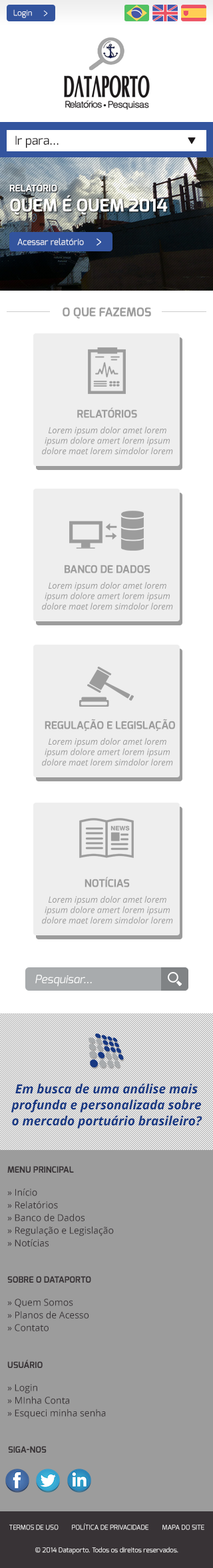
<style>
.page{position:relative;width:213px;height:1568px;background:#ffffff}
.page>*{position:absolute;margin:0}
.t1{font:8px "Exo-Regular";color:#ffffff}
.t2{font:12px "Exo-Regular";color:#1b1718}
.t3{font:17.3px/20px "Exo-Bold";color:#ffffff;text-transform:uppercase}
.t4{font:9.3px/20px "Exo-Bold";color:#ffffff;text-transform:uppercase}
.t5{font:8.7px "Exo-Regular";color:#ffffff}
.t6{font:12px "Exo-Bold";color:#9c9c9c}
.t7{font:10.7px "Exo-Bold";color:#9c9c9c}
.t8{font:8.7px "OpenSans-Italic";color:#999999}
.t9{font:11.3px "Exo-Italic";color:#ffffff}
.t10{font:12.7px/16px "OpenSans-BoldItalic";color:#173883}
.t11{font:9.3px/12.7px "OpenSans";color:#383336}
.t12{font:8.7px "Exo-Bold";color:#383336;text-transform:uppercase}
.t13{font:6.7px "Exo-Regular";color:#ffffff;text-transform:uppercase}
.t14{font:6.7px "Exo-Regular";color:#ffffff}
</style>
<div class="page">
<p class="t1" style="left:13px;top:9px;width:19px;height:9px">Login</p>
<p class="t2" style="left:15px;top:135px;width:44px;height:13px">Ir para...</p>
<p class="t3" style="left:9px;top:183px;width:159px;height:32px"><span class="t4">relatório<br></span>QUEM É quem 2014</p>
<p class="t5" style="left:17px;top:238px;width:67px;height:7px">Acessar relatório</p>
<p class="t6" style="left:63px;top:307px;width:88px;height:12px">O QUE FAZEMOS</p>
<p class="t7" style="left:77px;top:407px;width:60px;height:11px">RELATÓRIOS</p>
<p class="t8" style="left:42px;top:427px;width:131px;height:28px;text-align:center">Lorem ipsum dolor amet lorem ipsum dolore amert lorem ipsum dolore maet lorem simdolor lorem</p>
<p class="t7" style="left:65px;top:565px;width:86px;height:8px">BANCO DE DADOS</p>
<p class="t8" style="left:42px;top:582px;width:131px;height:28px;text-align:center">Lorem ipsum dolor amet lorem ipsum dolore amert lorem ipsum dolore maet lorem simdolor lorem</p>
<p class="t7" style="left:45px;top:719px;width:130px;height:12px">REGULAÇÃO E LEGISLAÇÃO</p>
<p class="t8" style="left:42px;top:738px;width:131px;height:28px;text-align:center">Lorem ipsum dolor amet lorem ipsum dolore amert lorem ipsum dolore maet lorem simdolor lorem</p>
<p class="t7" style="left:85px;top:877px;width:45px;height:10px">NOTÍCIAS</p>
<p class="t8" style="left:42px;top:896px;width:131px;height:28px;text-align:center">Lorem ipsum dolor amet lorem ipsum dolore amert lorem ipsum dolore maet lorem simdolor lorem</p>
<p class="t9" style="left:35px;top:975px;width:57px;height:12px">Pesquisar...</p>
<p class="t10" style="left:11px;top:1083px;width:192px;height:46px;text-align:center">Em busca de uma análise mais<br>profunda e personalizada sobre<br>o mercado portuário brasileiro?</p>
<p class="t11" style="left:7px;top:1166px;width:107px;height:81px"><span class="t12">MENU PRINCIPAL<br><br></span>» Início<br>» Relatórios<br>» Banco de Dados<br>» Regulação e Legislação<br>» Notícias</p>
<p class="t11" style="left:7px;top:1276px;width:84px;height:55px"><span class="t12">SOBRE O DATAPORTO<br><br></span>» Quem Somos<br>» Planos de Acesso<br>» Contato</p>
<p class="t11" style="left:7px;top:1359px;width:99px;height:60px"><span class="t12">usuário<br><br></span>» Login<br>» MInha Conta<br>» Esqueci minha senha</p>
<p class="t12" style="left:8px;top:1446px;width:39px;height:7px">SIGA-NOS</p>
<p class="t13" style="left:9px;top:1523px;width:196px;height:7px">Termos de Uso        Política de Privacidade        Mapa do Site</p>
<p class="t14" style="left:35px;top:1547px;width:144px;height:8px">© 2014 Dataporto. Todos os direitos reservados.</p>
</div>
